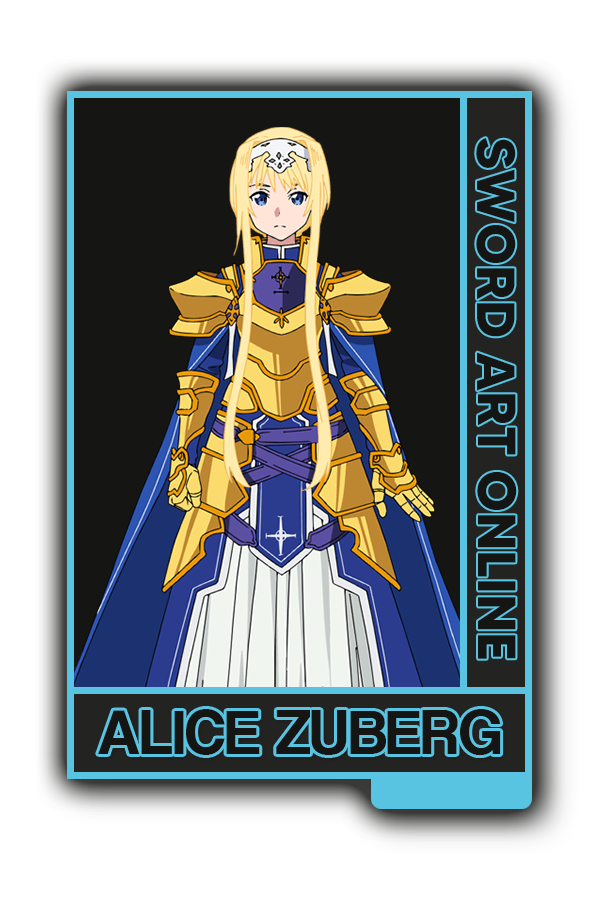
<style>
.page{position:relative;width:600px;height:900px;background:#151514}
.page>*{position:absolute;margin:0}
.t1{font:53.7px "MADETOMMY-Bold";color:#151514}
.t2{font:65.3px "CoolveticaRg-Regular";color:#151514}
</style>
<div class="page">
<p class="t1" style="left:476px;top:138px;width:41px;height:521px;rotate:90deg">SWORD ART ONLINE</p>
<p class="t2" style="left:98px;top:709px;width:403px;height:46px">ALICE ZUBERG</p>
</div>
